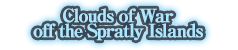
<style>
.page{position:relative;width:238px;height:50px;background:#ffffff}
.page>*{position:absolute;margin:0}
.t1{font:18px/15px "RyuminPro-ExBold";letter-spacing:-0.08em;color:#afe6ff;font-weight:bold}
</style>
<div class="page">
<p class="t1" style="left:33px;top:8px;width:170px;height:33px;text-align:center">Clouds of War<br>off the Spratly Islands</p>
</div>
